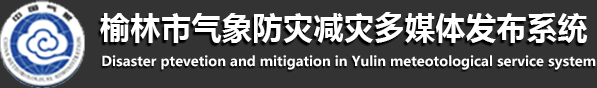
<style>
.page{position:relative;width:597px;height:88px;background:#333333}
.page>*{position:absolute;margin:0}
.t1{font:30.6px "MicrosoftYaHei-Bold";color:#ffffff}
.t2{font:13.6px "MicrosoftYaHei-Bold";color:#ffffff}
</style>
<div class="page">
<p class="t1" style="left:100px;top:12px;width:488px;height:31px">榆林市气象防灾减灾多媒体发布系统</p>
<p class="t2" style="left:102px;top:55px;width:494px;height:15px">Disaster ptevetion and mitigation in Yulin meteotological service system</p>
</div>
